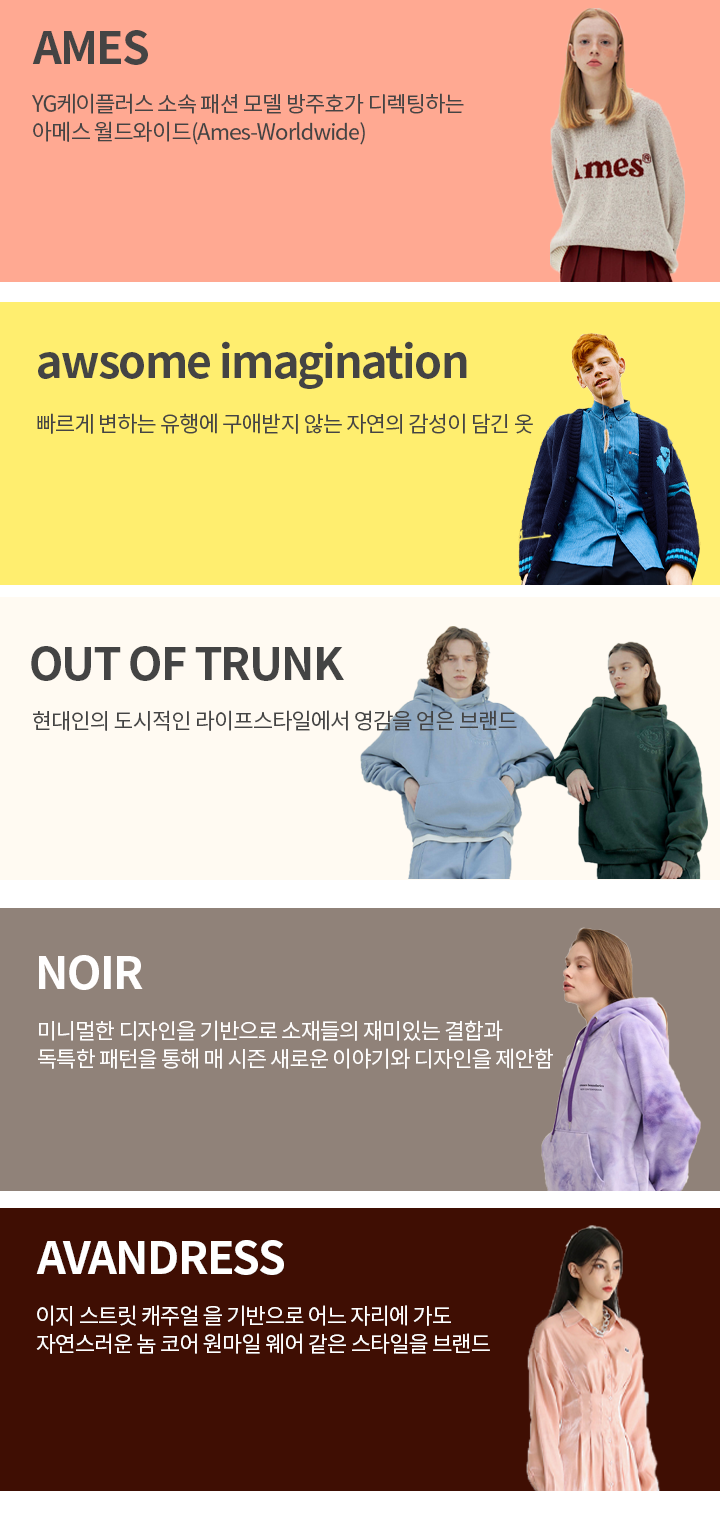
<style>
.page{position:relative;width:720px;height:1514px}
.page>*{position:absolute;margin:0}
.t1{font:45px "NotoSansCJKkr-Bold";letter-spacing:-0.04em;color:#444444}
.t2{font:22px/28px "NotoSansCJKkr-Regular";letter-spacing:-0.04em;color:#444444}
.t3{font:22px "NotoSansCJKkr-Regular";letter-spacing:-0.04em;color:#444444}
.t4{font:45px "NotoSansCJKkr-Bold";letter-spacing:-0.04em;color:#fffefe}
.t5{font:22px/28px "NotoSansCJKkr-Regular";letter-spacing:-0.04em;color:#fffefe}
.t6{font:45px "NotoSansCJKkr-Bold";letter-spacing:-0.04em;color:#ffffff}
.t7{font:22px/28px "NotoSansCJKkr-Regular";letter-spacing:-0.04em;color:#ffffff}
</style>
<div class="page">
<p class="t1" style="left:32px;top:30px;width:116px;height:35px">AMES</p>
<p class="t2" style="left:32px;top:93px;width:432px;height:52px">YG케이플러스 소속 패션 모델 방주호가 디렉팅하는 <br>아메스 월드와이드(Ames-Worldwide)</p>
<p class="t1" style="left:38px;top:341px;width:429px;height:48px">awsome imagination</p>
<p class="t3" style="left:37px;top:413px;width:496px;height:21px">빠르게 변하는 유행에 구애받지 않는 자연의 감성이 담긴 옷</p>
<p class="t1" style="left:31px;top:646px;width:313px;height:35px">OUT OF TRUNK</p>
<p class="t3" style="left:33px;top:710px;width:484px;height:21px">현대인의 도시적인 라이프스타일에서 영감을 얻은 브랜드</p>
<p class="t4" style="left:39px;top:955px;width:104px;height:35px">NOIR</p>
<p class="t5" style="left:38px;top:1020px;width:515px;height:49px">미니멀한 디자인을 기반으로 소재들의 재미있는 결합과 <br>독특한 패턴을 통해 매 시즌 새로운 이야기와 디자인을 제안함</p>
<p class="t6" style="left:36px;top:1240px;width:248px;height:35px">ＡVANDRESS</p>
<p class="t7" style="left:36px;top:1305px;width:454px;height:49px">이지 스트릿 캐주얼 을 기반으로 어느 자리에 가도 <br>자연스러운 놈 코어 원마일 웨어 같은 스타일을 브랜드</p>
</div>
